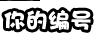
<style>
.page{position:relative;width:96px;height:40px;background:#ffffff}
.page>*{position:absolute;margin:0}
.t1{font:22px "DFPHaiBaoW12";letter-spacing:0.01em;color:#ffffff}
</style>
<div class="page">
<p class="t1" style="left:4px;top:10px;width:87px;height:20px">你的编号</p>
</div>
